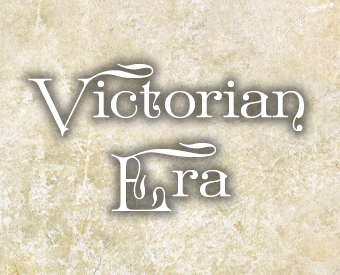
<style>
.page{position:relative;width:340px;height:275px}
.page>*{position:absolute;margin:0}
.t1{font:83.1px "GreatVictorian-Swashed";color:#ffffff}
</style>
<div class="page">
<p class="t1" style="left:28px;top:63px;width:276px;height:74px">Victorian</p>
<p class="t1" style="left:111px;top:142px;width:120px;height:69px">Era</p>
</div>
